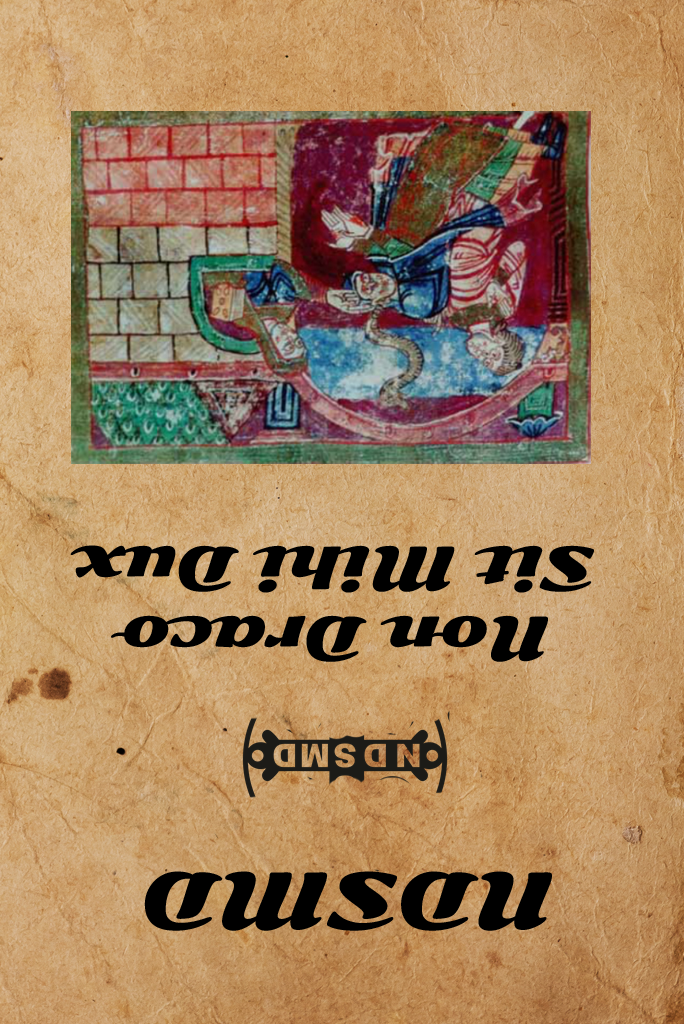
<style>
.page{position:relative;width:684px;height:1024px}
.page>*{position:absolute;margin:0}
.t1{font:58.3px "SonsieOne-Regular";color:#000000}
.t2{font:75px "SonsieOne-Regular";color:#000000}
</style>
<div class="page">
<p class="t1" style="left:70px;top:545px;width:524px;height:117px;text-align:center;rotate:180deg">Non Draco <br>Sit Mihi Dux</p>
<p class="t2" style="left:144px;top:871px;width:408px;height:60px;rotate:180deg">NDSMD</p>
</div>
